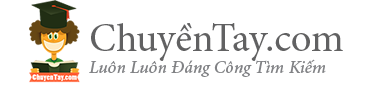
<style>
.page{position:relative;width:368px;height:100px;background:#ffffff}
.page>*{position:absolute;margin:0}
.t1{font:40px "MinionPro-Regular";color:#616162}
.t2{font:18px "MinionPro-MediumIt";color:#818285}
</style>
<div class="page">
<p class="t1" style="left:91px;top:23px;width:252px;height:38px">ChuyềnTay.com</p>
<p class="t2" style="left:89px;top:59px;width:237px;height:18px">Luôn Luôn Đáng Công Tìm Kiếm</p>
</div>
